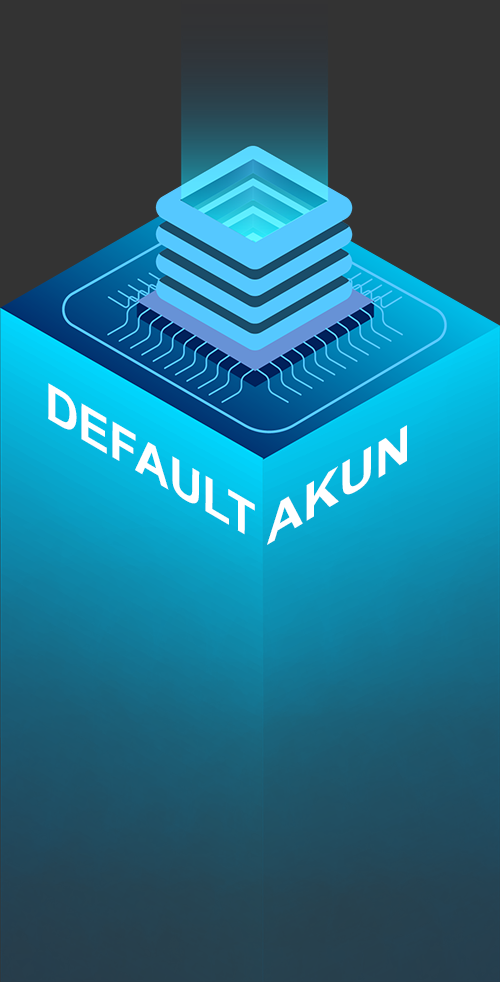
<style>
.page{position:relative;width:500px;height:982px}
.page>*{position:absolute;margin:0}
.t1{font:49.8px "Arial-BoldMT";color:#ffffff;scale:1.08 1}
.t2{font:49.8px "Arial-BoldMT";color:#ffffff;scale:1.17 1}
</style>
<div class="page">
<p class="t1" style="left:48px;top:383px;width:207px;height:152px;rotate:30deg">DEFAULT</p>
<p class="t2" style="left:267px;top:425px;width:140px;height:120px;rotate:-31deg">AKUN</p>
</div>
